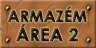
<style>
.page{position:relative;width:96px;height:48px}
.page>*{position:absolute;margin:0}
.t1{font:16px/17.3px "CenturyGothic-Bold";letter-spacing:-0.015em;text-transform:uppercase;font-weight:bold}
.t2{font:18px/19.3px "CenturyGothic-Bold";letter-spacing:-0.015em;text-transform:uppercase;font-weight:bold}
</style>
<div class="page">
<p class="t1" style="left:7px;top:6px;width:80px;height:36px;text-align:center">ARMAZÉM<br><span class="t2">ÁREA 2</span></p>
</div>
